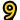
<style>
.page{position:relative;width:20px;height:20px;background:#ffffff}
.page>*{position:absolute;margin:0}
.t1{font:20.2px "ComicSansMS";color:#ffd800}
</style>
<div class="page">
<p class="t1" style="left:4px;top:2px;width:11px;height:17px">9</p>
</div>
